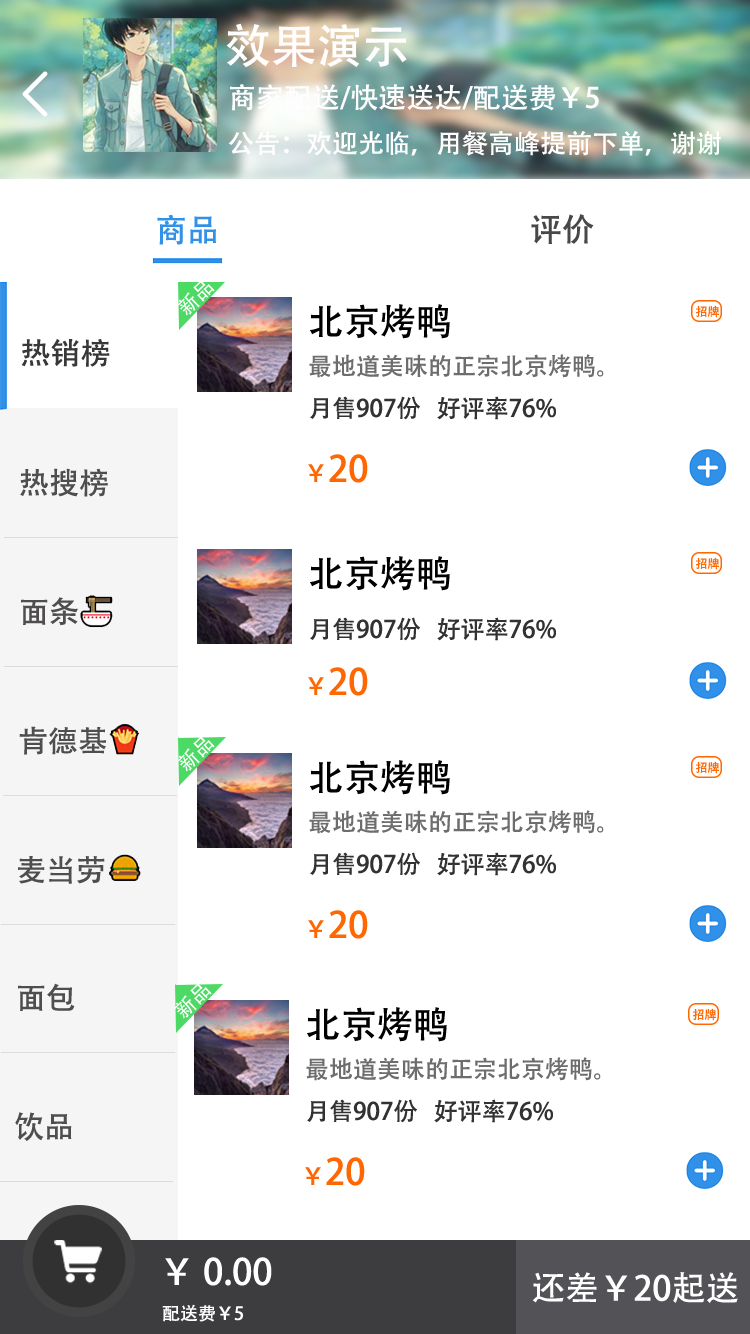
<style>
.page{position:relative;width:750px;height:1334px;background:#ffffff}
.page>*{position:absolute;margin:0}
.t1{font:46px "AdobeHeitiStd-Regular";color:#fffefe}
.t2{font:28px "AdobeHeitiStd-Regular";color:#fffefe}
.t3{font:26px "AdobeHeitiStd-Regular";color:#fffefe}
.t4{font:32px "AdobeHeitiStd-Regular";color:#3191e8}
.t5{font:32px "AdobeHeitiStd-Regular";color:#474848}
.t6{font:20.4px "AdobeHeitiStd-Regular";color:#fefffe}
.t7{font:36px "AdobeHeitiStd-Regular";color:#000000}
.t8{font:12px "AdobeHeitiStd-Regular";color:#fe6701}
.t9{font:30px "AdobeHeitiStd-Regular";color:#383838}
.t10{font:24px "AdobeHeitiStd-Regular";color:#6e6d6d}
.t11{font:24px "AdobeHeitiStd-Regular";color:#323232}
.t12{font:36px "AdobeHeitiStd-Regular";color:#fe6701}
.t13{font:24px "AdobeHeitiStd-Regular";color:#fe6701}
.t14{font:30px "AdobeHeitiStd-Regular";color:#4f4d4d}
.t15{font:36px "AdobeHeitiStd-Regular";color:#fefefe}
.t16{font:34px "AdobeHeitiStd-Regular";color:#fefefe}
.t17{font:18px "AdobeHeitiStd-Regular";color:#fefefe}
</style>
<div class="page">
<p class="t1" style="left:226px;top:23px;width:181px;height:45px">效果演示</p>
<p class="t2" style="left:230px;top:84px;width:369px;height:27px">商家配送/快速送达/配送费￥5</p>
<p class="t3" style="left:228px;top:131px;width:493px;height:25px">公告：欢迎光临，用餐高峰提前下单，谢谢</p>
<p class="t4" style="left:157px;top:214px;width:59px;height:31px">商品</p>
<p class="t5" style="left:531px;top:214px;width:63px;height:30px">评价</p>
<p class="t6" style="left:177px;top:280px;width:38px;height:36px;rotate:-44deg">新品</p>
<p class="t7" style="left:310px;top:304px;width:140px;height:35px">北京烤鸭</p>
<p class="t8" style="left:696px;top:305px;width:23px;height:13px">招牌</p>
<p class="t9" style="left:21px;top:339px;width:89px;height:28px">热销榜</p>
<p class="t10" style="left:309px;top:354px;width:295px;height:24px">最地道美味的正宗北京烤鸭。</p>
<p class="t11" style="left:310px;top:396px;width:246px;height:24px">月售907份   好评率76%</p>
<p class="t12" style="left:308px;top:454px;width:60px;height:29px"><span class="t13">￥</span>20</p>
<p class="t14" style="left:20px;top:468px;width:88px;height:29px">热搜榜</p>
<p class="t7" style="left:310px;top:556px;width:140px;height:35px">北京烤鸭</p>
<p class="t8" style="left:696px;top:557px;width:23px;height:13px">招牌</p>
<p class="t14" style="left:21px;top:597px;width:57px;height:29px">面条</p>
<p class="t11" style="left:310px;top:617px;width:246px;height:24px">月售907份   好评率76%</p>
<p class="t12" style="left:308px;top:667px;width:60px;height:29px"><span class="t13">￥</span>20</p>
<p class="t14" style="left:19px;top:726px;width:87px;height:29px">肯德基</p>
<p class="t6" style="left:177px;top:736px;width:38px;height:36px;rotate:-44deg">新品</p>
<p class="t7" style="left:310px;top:760px;width:140px;height:35px">北京烤鸭</p>
<p class="t8" style="left:696px;top:761px;width:23px;height:13px">招牌</p>
<p class="t10" style="left:309px;top:810px;width:295px;height:24px">最地道美味的正宗北京烤鸭。</p>
<p class="t14" style="left:18px;top:856px;width:87px;height:28px">麦当劳</p>
<p class="t11" style="left:310px;top:852px;width:246px;height:24px">月售907份   好评率76%</p>
<p class="t12" style="left:308px;top:910px;width:60px;height:29px"><span class="t13">￥</span>20</p>
<p class="t14" style="left:18px;top:983px;width:57px;height:28px">面包</p>
<p class="t6" style="left:174px;top:983px;width:38px;height:36px;rotate:-44deg">新品</p>
<p class="t7" style="left:307px;top:1007px;width:140px;height:35px">北京烤鸭</p>
<p class="t8" style="left:693px;top:1008px;width:23px;height:13px">招牌</p>
<p class="t10" style="left:306px;top:1057px;width:295px;height:24px">最地道美味的正宗北京烤鸭。</p>
<p class="t11" style="left:307px;top:1099px;width:246px;height:24px">月售907份   好评率76%</p>
<p class="t14" style="left:15px;top:1112px;width:57px;height:29px">饮品</p>
<p class="t12" style="left:305px;top:1157px;width:60px;height:29px"><span class="t13">￥</span>20</p>
<p class="t15" style="left:165px;top:1257px;width:107px;height:29px">￥ 0.00</p>
<p class="t16" style="left:532px;top:1272px;width:206px;height:31px">还差￥20起送</p>
<p class="t17" style="left:162px;top:1304px;width:81px;height:18px">配送费￥5</p>
</div>
